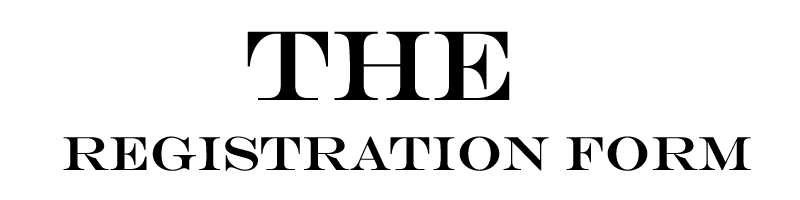
<style>
.page{position:relative;width:800px;height:200px;background:#ffffff}
.page>*{position:absolute;margin:0}
.t1{font:100px "EngraversMT";color:#000000}
.t2{font:48px "EngraversMT";color:#000000}
</style>
<div class="page">
<p class="t1" style="left:247px;top:31px;width:263px;height:69px">The</p>
<p class="t2" style="left:63px;top:136px;width:688px;height:35px">Registration form</p>
</div>
